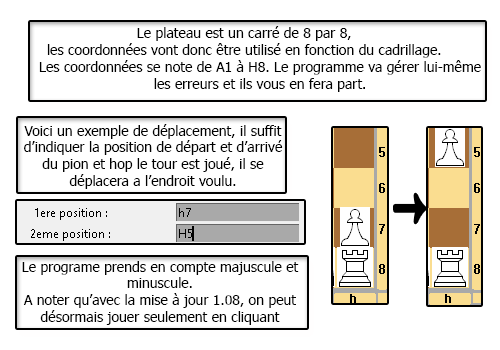
<style>
.page{position:relative;width:500px;height:350px;background:#ffffff}
.page>*{position:absolute;margin:0}
.t1{font:14px "Tahoma";color:#000000}
</style>
<div class="page">
<p class="t1" style="left:39px;top:26px;width:442px;height:66px;text-align:center">Le plateau est un carré de 8 par 8,<br> les coordonnées vont donc être utilisé en fonction du cadrillage.<br> Les coordonnées se note de A1 à H8. Le programme va gérer lui-même<br> les erreurs et ils vous en fera part.</p>
<p class="t1" style="left:24px;top:124px;width:259px;height:65px;text-align:center">Voici un exemple de déplacement, il suffit d’indiquer la position de départ et d’arrivé du pion et hop le tour est joué, il se déplacera a l’endroit voulu.</p>
<p class="t1" style="left:22px;top:261px;width:277px;height:64px;text-align:center">Le programe prends en compte majuscule et minuscule.<br>A noter qu’avec la mise à jour 1.08, on peut désormais jouer seulement en cliquant</p>
</div>
